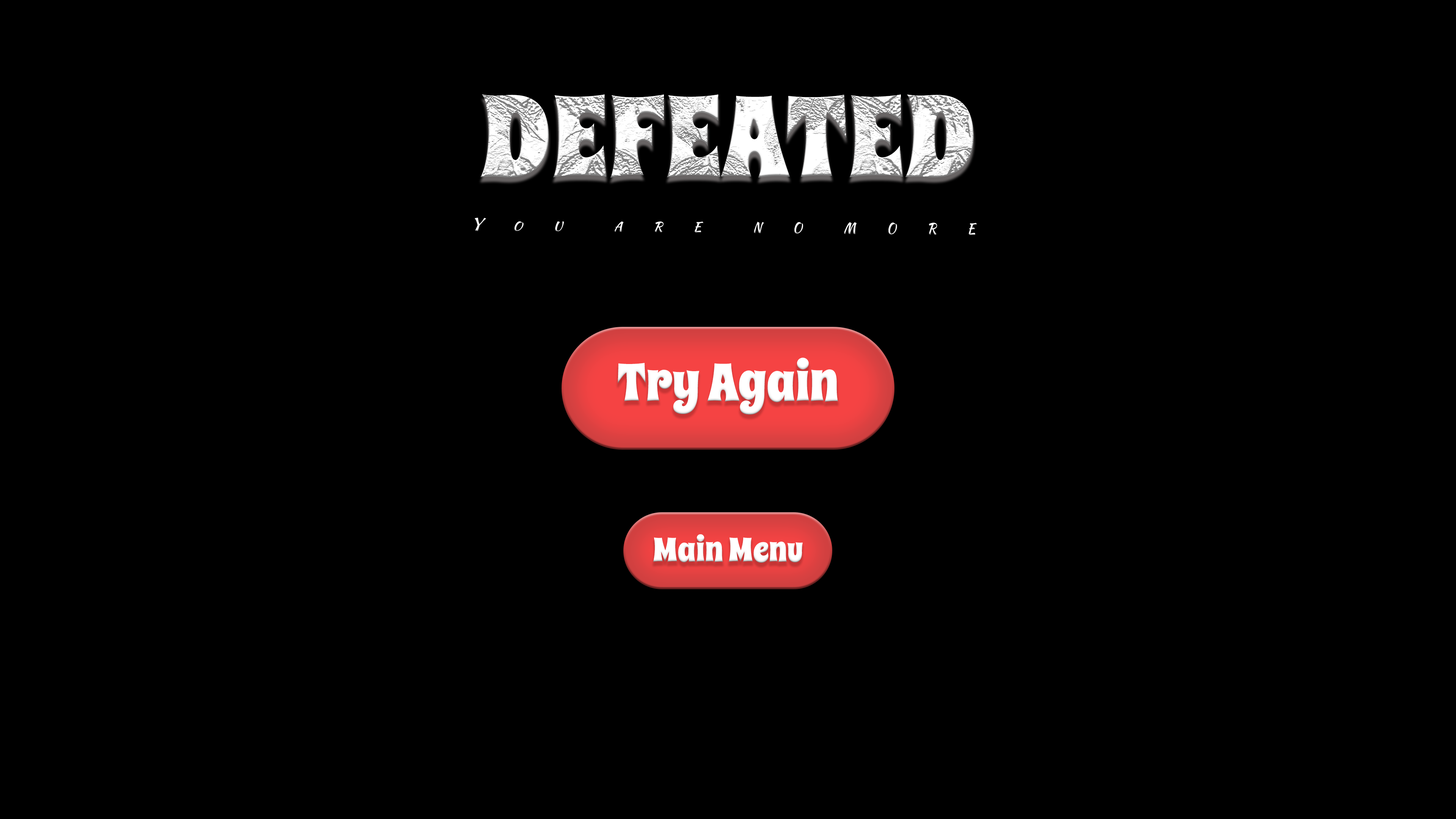
<style>
.page{position:relative;width:1456px;height:819px;background:#000000}
.page>*{position:absolute;margin:0}
.t1{font:113.8px "SpicyRice-Regular";color:#ffffff}
.t2{font:31.8px "KaushanScript-Regular";color:#ffffff;font-variant:small-caps}
.t3{font:53.1px "SpicyRice-Regular";color:#ffffff}
.t4{font:33.7px "SpicyRice-Regular";color:#ffffff}
</style>
<div class="page">
<p class="t1" style="left:480px;top:94px;width:494px;height:84px">DEFEATED</p>
<p class="t2" style="left:475px;top:218px;width:502px;height:17px">Y   o   u     a   r   e     n   o    m   o   r   e</p>
<p class="t3" style="left:618px;top:358px;width:220px;height:57px">Try Again</p>
<p class="t4" style="left:653px;top:534px;width:150px;height:29px">Main Menu</p>
</div>
